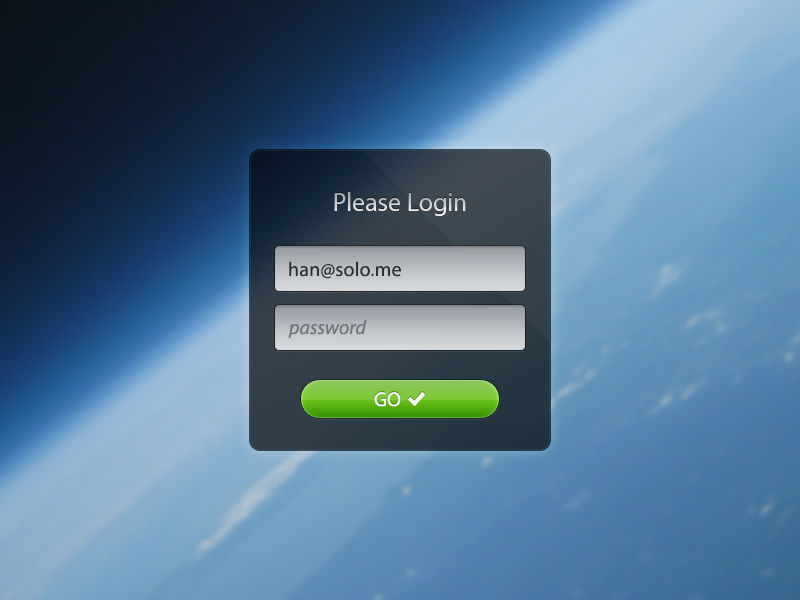
<style>
.page{position:relative;width:800px;height:600px}
.page>*{position:absolute;margin:0}
.t1{font:26px "MyriadPro-Regular"}
.t2{font:20px "MyriadPro-Regular";letter-spacing:0.01em;color:#2f2f2f}
.t3{font:20px "MyriadPro-It";color:#70767c}
.t4{font:20px "MyriadPro-Regular";letter-spacing:0.01em;color:#fbfbfb}
.t5{font:24px "ModernPictograms";letter-spacing:0.01em;color:#fbfbfb}
</style>
<div class="page">
<p class="t1" style="left:334px;top:192px;width:132px;height:24px">Please Login</p>
<p class="t2" style="left:289px;top:261px;width:112px;height:18px">han@solo.me</p>
<p class="t3" style="left:288px;top:319px;width:79px;height:19px">password</p>
<p class="t4" style="left:374px;top:392px;width:27px;height:15px">GO</p>
<p class="t5" style="left:408px;top:392px;width:17px;height:14px">%</p>
</div>
